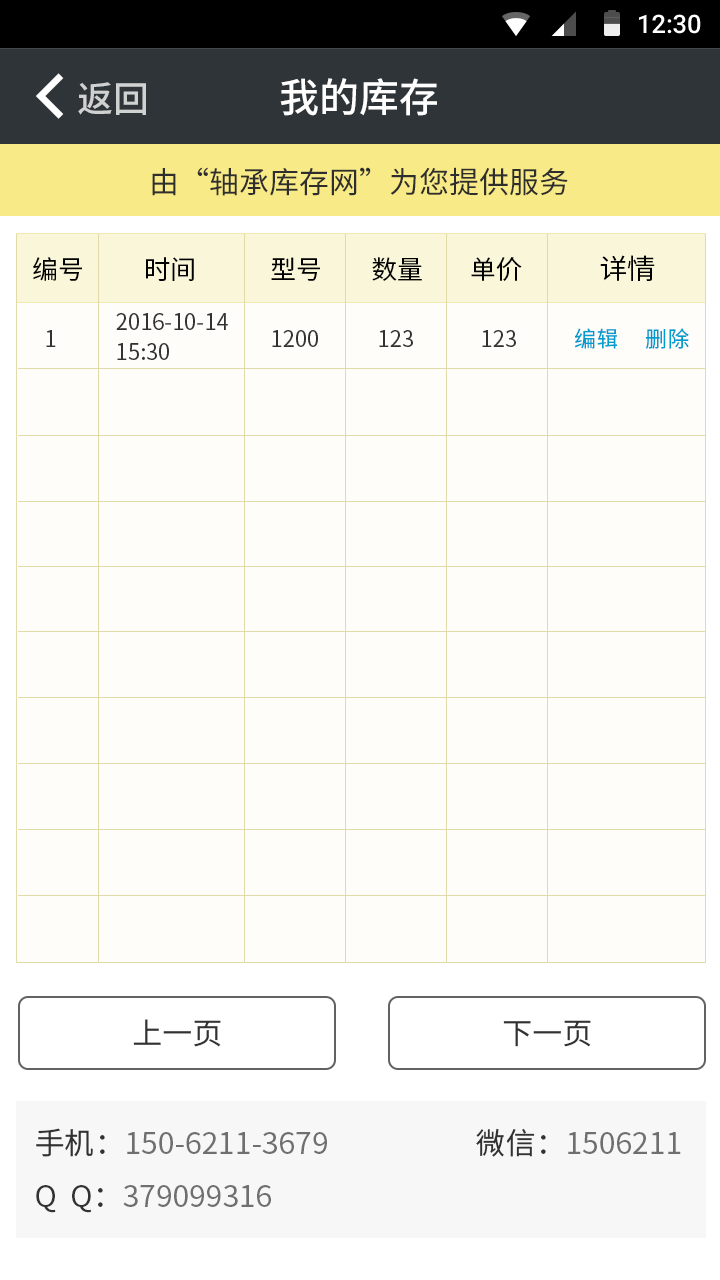
<style>
.page{position:relative;width:720px;height:1280px;background:#fefdf9}
.page>*{position:absolute;margin:0}
.t1{font:25.4px "Roboto-Medium";color:#ffffff}
.t2{font:40px "SourceHanSansCN-Medium";color:#ffffff}
.t3{font:36px "SourceHanSansCN-Medium";color:#d0d1d1}
.t4{font:30px "SourceHanSansCN-Regular";color:#2e2e2e}
.t5{font:26px "SourceHanSansCN-Regular";color:#000000}
.t6{font:28px "SourceHanSansCN-Regular";color:#000000}
.t7{font:22px/30px "SourceHanSansCN-Regular";color:#323232}
.t8{font:22px "SourceHanSansCN-Regular";color:#029ccf}
.t9{font:22px "SourceHanSansCN-Regular";color:#323232}
.t10{font:30px "SourceHanSansCN-Regular";color:#323232}
.t11{font:30px "SourceHanSansCN-Regular";color:#6f6f6f}
</style>
<div class="page">
<p class="t1" style="left:639px;top:14px;width:62px;height:20px">12:30</p>
<p class="t1" style="left:639px;top:14px;width:62px;height:20px">12:30</p>
<p class="t2" style="left:280px;top:78px;width:157px;height:38px">我的库存</p>
<p class="t3" style="left:78px;top:82px;width:68px;height:33px">返回</p>
<p class="t4" style="left:152px;top:167px;width:416px;height:29px">由“轴承库存网”为您提供服务</p>
<p class="t5" style="left:33px;top:257px;width:49px;height:24px">编号</p>
<p class="t5" style="left:146px;top:257px;width:48px;height:24px">时间</p>
<p class="t5" style="left:271px;top:257px;width:49px;height:24px">型号</p>
<p class="t5" style="left:372px;top:257px;width:50px;height:24px">数量</p>
<p class="t5" style="left:471px;top:257px;width:51px;height:24px">单价</p>
<p class="t6" style="left:600px;top:255px;width:55px;height:26px">详情</p>
<p class="t7" style="left:116px;top:313px;width:112px;height:47px">2016-10-14 <br>15:30</p>
<p class="t8" style="left:574px;top:328px;width:44px;height:21px">编辑</p>
<p class="t8" style="left:645px;top:328px;width:44px;height:21px">删除</p>
<p class="t9" style="left:46px;top:330px;width:10px;height:17px">1</p>
<p class="t9" style="left:272px;top:330px;width:46px;height:17px">1200</p>
<p class="t9" style="left:379px;top:330px;width:34px;height:17px">123</p>
<p class="t9" style="left:482px;top:330px;width:34px;height:17px">123</p>
<p class="t10" style="left:133px;top:1019px;width:88px;height:28px">上一页</p>
<p class="t10" style="left:503px;top:1020px;width:88px;height:27px">下一页</p>
<p class="t11" style="left:36px;top:1128px;width:291px;height:29px"><span class="t10">手机：</span>150-6211-3679</p>
<p class="t11" style="left:476px;top:1128px;width:205px;height:29px"><span class="t10">微信：</span>1506211</p>
<p class="t11" style="left:36px;top:1185px;width:235px;height:28px"><span class="t10">Q  Q：</span>379099316</p>
</div>
